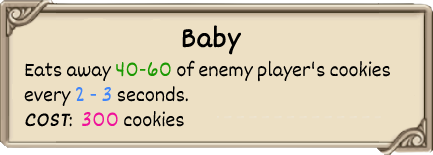
<style>
.page{position:relative;width:433px;height:155px;background:#ede0c4}
.page>*{position:absolute;margin:0}
.t1{font:30px "Dekko";color:#000000;font-weight:bold}
.t2{font:21px "Dekko";color:#000000}
.t3{font:21px "Dekko";color:#1b9902}
.t4{font:21px "Dekko";color:#4086fa}
.t5{font:21px "Dekko";color:#000000;font-weight:bold;font-style:italic}
.t6{font:21px "Dekko";color:#f0129a}
</style>
<div class="page">
<p class="t1" style="left:182px;top:25px;width:60px;height:30px">Baby</p>
<p class="t2" style="left:24px;top:60px;width:366px;height:67px">Eats away <span class="t3">40-60 </span>of enemy player's cookies<br>every <span class="t4">2 - 3 </span>seconds.<br><span class="t5">COST</span>:  <span class="t6">300 </span>cookies</p>
</div>
